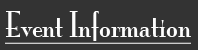
<style>
.page{position:relative;width:198px;height:50px;background:#333333}
.page>*{position:absolute;margin:0}
.t1{font:32px "MonaLisaSolidITCTT";color:#fefefe;text-decoration:underline}
</style>
<div class="page">
<p class="t1" style="left:5px;top:11px;width:186px;height:33px">Event Information</p>
</div>
